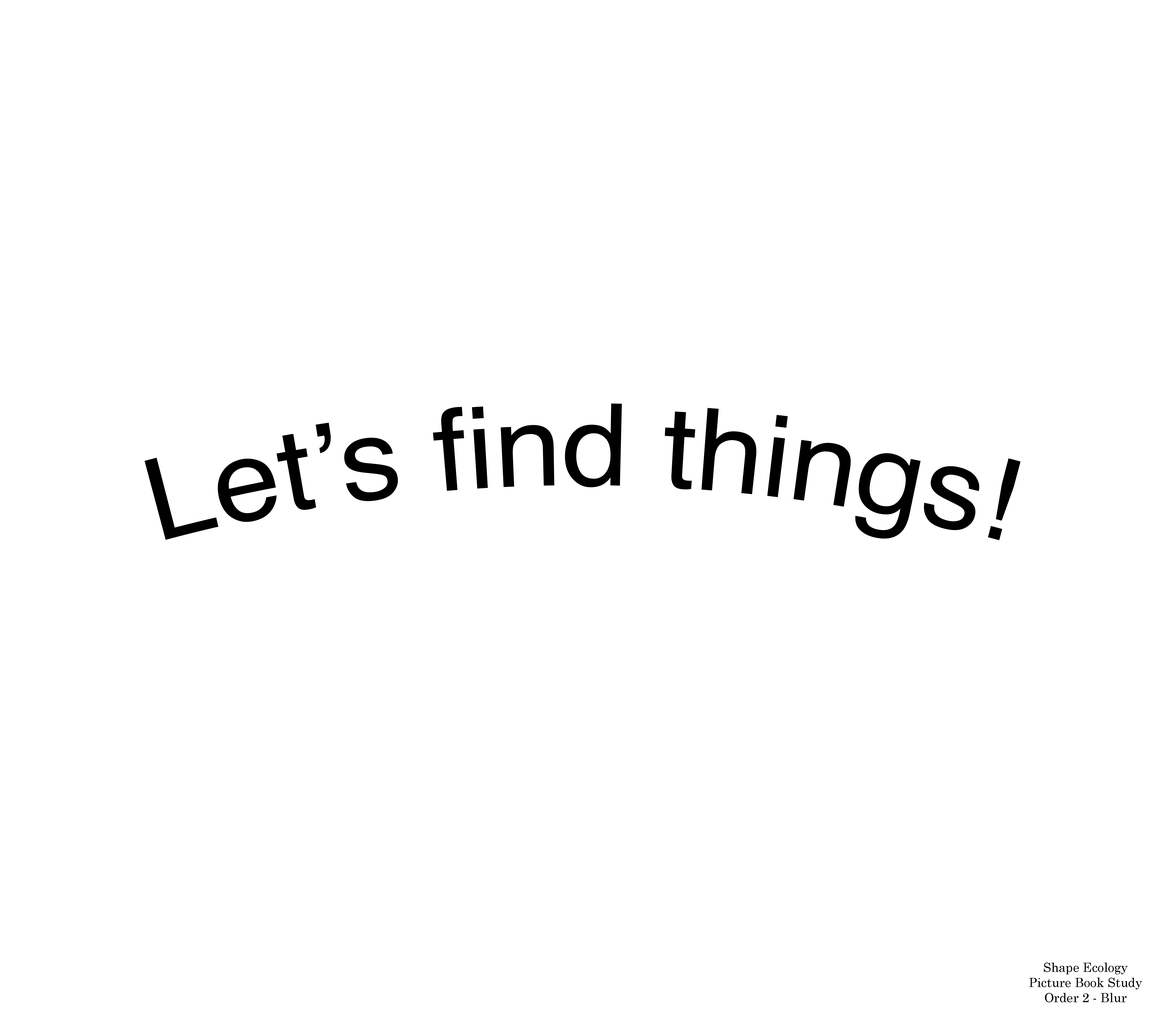
<style>
.page{position:relative;width:1165px;height:1023px;background:#ffffff}
.page>*{position:absolute;margin:0}
.t1{font:113.7px "Helvetica";color:#000000}
.t2{font:12.6px "CenturySchoolbook";color:#000000}
</style>
<div class="page">
<p class="t1" style="left:145px;top:404px;width:876px;height:136px">Let’s find things!</p>
<p class="t2" style="left:1029px;top:963px;width:113px;height:40px;text-align:center">Shape Ecology<br>Picture Book Study<br>Order 2 - Blur</p>
</div>
